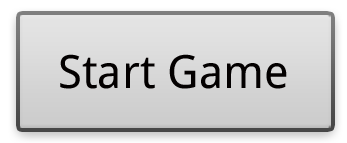
<style>
.page{position:relative;width:347px;height:143px}
.page>*{position:absolute;margin:0}
.t1{font:45.8px "DroidSans";color:#030000}
</style>
<div class="page">
<p class="t1" style="left:60px;top:54px;width:227px;height:35px">Start Game</p>
</div>
